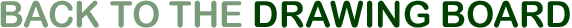
<style>
.page{position:relative;width:572px;height:28px;background:#ffffff}
.page>*{position:absolute;margin:0}
.t1{font:36px "ArialRoundedMTBold";color:#7a9b7a}
.t2{font:36px "ArialRoundedMTBold";color:#004000}
</style>
<div class="page">
<p class="t1" style="left:0px;top:0px;width:242px;height:28px">BACK TO THE</p>
<p class="t2" style="left:254px;top:0px;width:316px;height:28px">DRAWING BOARD</p>
</div>
